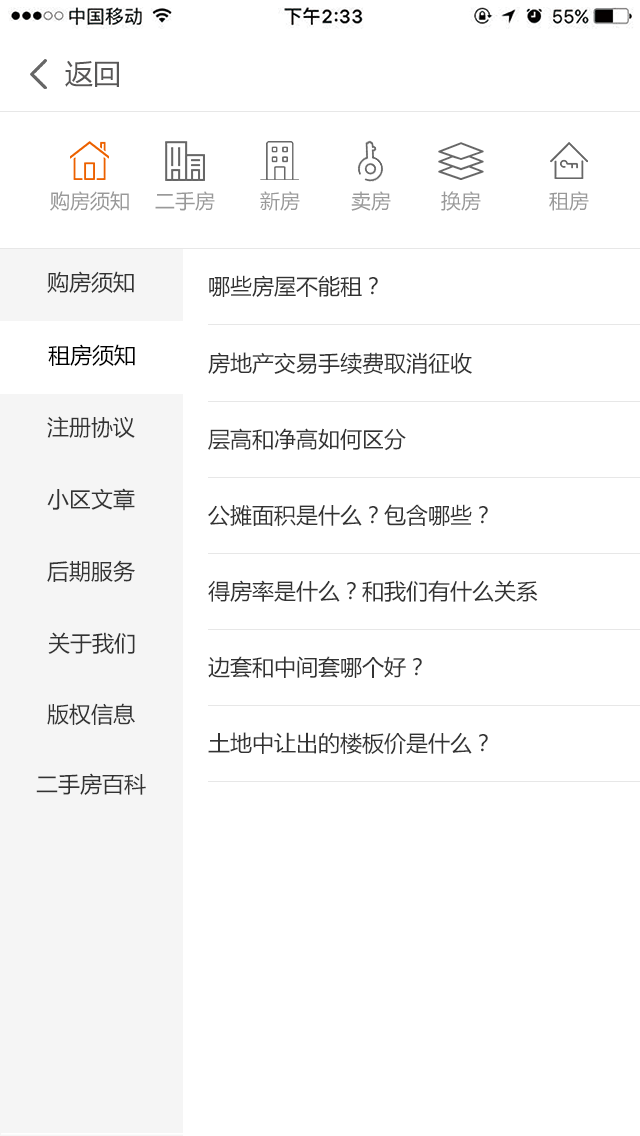
<style>
.page{position:relative;width:640px;height:1136px;background:#ffffff}
.page>*{position:absolute;margin:0}
.t1{font:28px "MicrosoftYaHei";color:#585757}
.t2{font:20px "MicrosoftYaHei";color:#999999}
.t3{font:22px "MicrosoftYaHei";color:#333333}
.t4{font:22px "MicrosoftYaHei";color:#000000}
</style>
<div class="page">
<p class="t1" style="left:65px;top:60px;width:54px;height:27px">返回</p>
<p class="t2" style="left:50px;top:191px;width:79px;height:20px">购房须知</p>
<p class="t2" style="left:155px;top:191px;width:60px;height:20px">二手房</p>
<p class="t2" style="left:260px;top:191px;width:40px;height:20px">新房</p>
<p class="t2" style="left:351px;top:191px;width:40px;height:20px">卖房</p>
<p class="t2" style="left:441px;top:191px;width:40px;height:20px">换房</p>
<p class="t2" style="left:549px;top:191px;width:40px;height:20px">租房</p>
<p class="t3" style="left:47px;top:271px;width:87px;height:22px">购房须知</p>
<p class="t3" style="left:209px;top:275px;width:169px;height:22px">哪些房屋不能租？</p>
<p class="t4" style="left:48px;top:344px;width:87px;height:22px">租房须知</p>
<p class="t3" style="left:208px;top:352px;width:264px;height:22px">房地产交易手续费取消征收</p>
<p class="t3" style="left:47px;top:416px;width:88px;height:22px">注册协议</p>
<p class="t3" style="left:208px;top:428px;width:198px;height:23px">层高和净高如何区分</p>
<p class="t3" style="left:47px;top:488px;width:88px;height:23px">小区文章</p>
<p class="t3" style="left:208px;top:504px;width:280px;height:22px">公摊面积是什么？包含哪些？</p>
<p class="t3" style="left:47px;top:560px;width:88px;height:22px">后期服务</p>
<p class="t3" style="left:208px;top:580px;width:330px;height:22px">得房率是什么？和我们有什么关系</p>
<p class="t3" style="left:48px;top:632px;width:87px;height:22px">关于我们</p>
<p class="t3" style="left:208px;top:656px;width:214px;height:22px">边套和中间套哪个好？</p>
<p class="t3" style="left:47px;top:703px;width:88px;height:22px">版权信息</p>
<p class="t3" style="left:208px;top:732px;width:280px;height:23px">土地中让出的楼板价是什么？</p>
<p class="t3" style="left:36px;top:773px;width:110px;height:22px">二手房百科</p>
</div>
